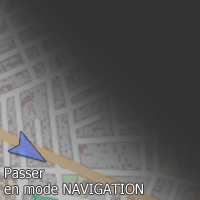
<style>
.page{position:relative;width:200px;height:200px;background:#333333}
.page>*{position:absolute;margin:0}
.t1{font:14px "Tahoma";color:#ffffff}
</style>
<div class="page">
<p class="t1" style="left:4px;top:167px;width:139px;height:28px">Passer <br>en mode NAVIGATION</p>
</div>
